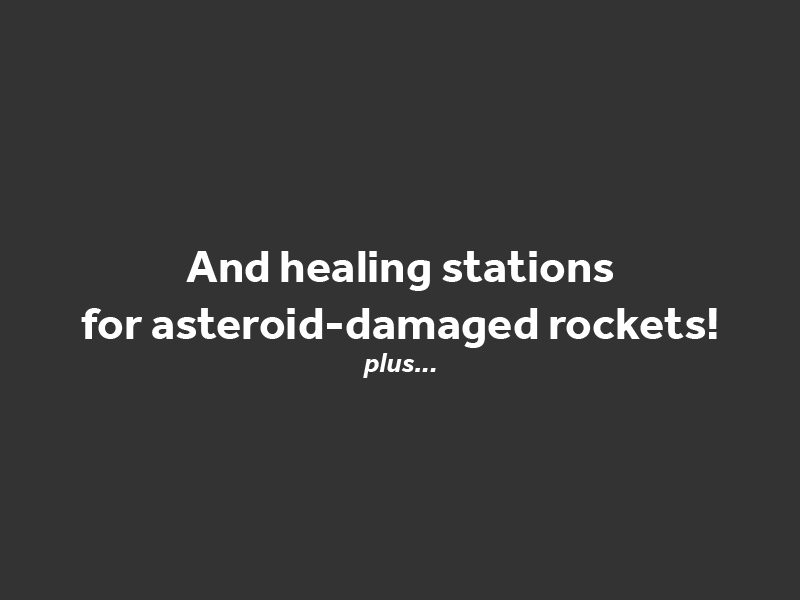
<style>
.page{position:relative;width:800px;height:600px;background:#333333}
.page>*{position:absolute;margin:0}
.t1{font:47.1px "Effra-Bold";color:#ffffff}
.t2{font:28.1px "Effra-BoldItalic";color:#ffffff}
</style>
<div class="page">
<p class="t1" style="left:81px;top:251px;width:636px;height:97px;text-align:center">And healing stations<br>for asteroid-damaged rockets!</p>
<p class="t2" style="left:363px;top:353px;width:73px;height:25px">plus...</p>
</div>
